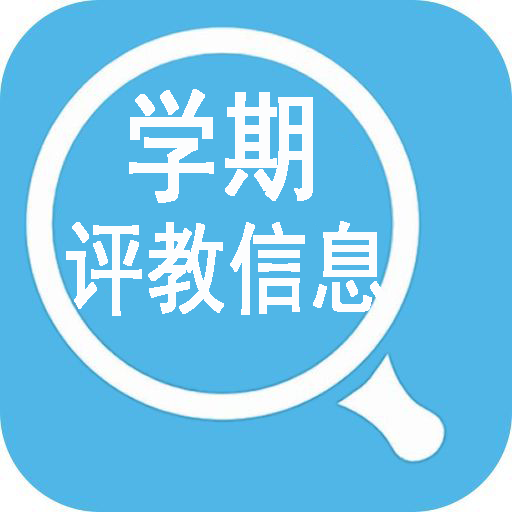
<style>
.page{position:relative;width:512px;height:512px;background:#50b6e7}
.page>*{position:absolute;margin:0}
.t1{font:120px "SimHei";color:#fcfdfe;font-weight:bold;scale:0.8 1}
.t2{font:100px "SimHei";color:#fcfdfe;font-weight:bold;scale:0.8 1}
</style>
<div class="page">
<p class="t1" style="left:129px;top:89px;width:184px;height:114px">学期</p>
<p class="t2" style="left:66px;top:221px;width:321px;height:95px">评教信息</p>
</div>
